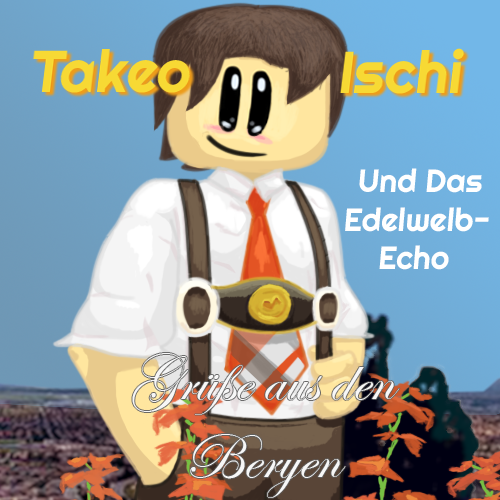
<style>
.page{position:relative;width:500px;height:500px}
.page>*{position:absolute;margin:0}
.t1{font:32.1px "Righteous-Regular";color:#ffffff}
.t2{font:65.3px "EdwardianScriptITC";color:#f7f7f7}
</style>
<div class="page">
<p class="t1" style="left:345px;top:168px;width:144px;height:102px;text-align:center">Und Das<br>Edelwelb-<br>Echo</p>
<p class="t2" style="left:132px;top:353px;width:268px;height:145px;text-align:center">Grüße aus den<br>Beryen</p>
</div>
